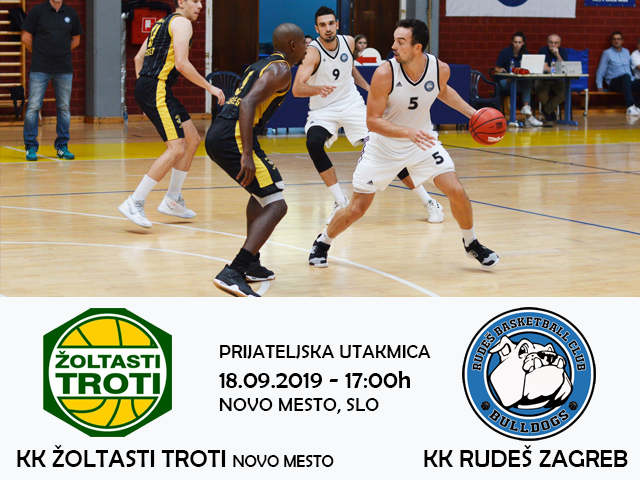
<style>
.page{position:relative;width:640px;height:480px;background:#f8f9fa}
.page>*{position:absolute;margin:0}
.t1{font:19.4px "BerlinSansFB-Reg";color:#010000}
.t2{font:25px "BerlinSansFB-Reg";color:#010000}
.t3{font:25px "BerlinSansFB-Reg";color:#000000}
.t4{font:16.7px "BerlinSansFB-Reg";color:#000000}
</style>
<div class="page">
<p class="t1" style="left:219px;top:345px;width:212px;height:69px">PRIJATELJSKA UTAKMICA <br><span class="t2">18.09.2019 - 17:00h<br></span>NOVO MESTO, SLO</p>
<p class="t3" style="left:17px;top:445px;width:317px;height:22px">KK ŽOLTASTI TROTI <span class="t4">NOVO MESTO</span></p>
<p class="t2" style="left:424px;top:445px;width:204px;height:22px">KK RUDEŠ ZAGREB</p>
</div>
